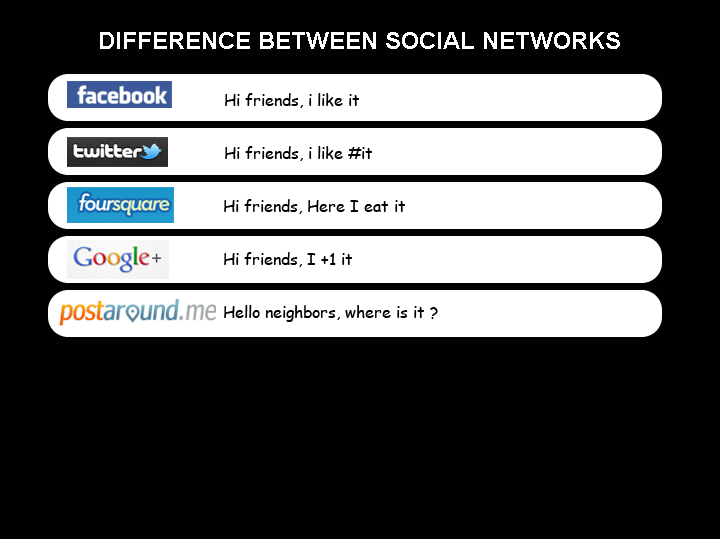
<style>
.page{position:relative;width:720px;height:539px;background:#010101}
.page>*{position:absolute;margin:0}
.t1{font:24px "Arial-BoldMT";color:#ffffff}
.t2{font:16px "ComicSansMS";color:#000000}
</style>
<div class="page">
<p class="t1" style="left:100px;top:32px;width:520px;height:17px">DIFFERENCE BETWEEN SOCIAL NETWORKS</p>
<p class="t2" style="left:225px;top:93px;width:134px;height:15px">Hi friends, i like it</p>
<p class="t2" style="left:225px;top:146px;width:147px;height:15px">Hi friends, i like #it</p>
<p class="t2" style="left:224px;top:199px;width:181px;height:15px">Hi friends, Here I eat it</p>
<p class="t2" style="left:224px;top:252px;width:128px;height:15px">Hi friends, I +1 it</p>
<p class="t2" style="left:224px;top:305px;width:214px;height:17px">Hello neighbors, where is it ?</p>
</div>
